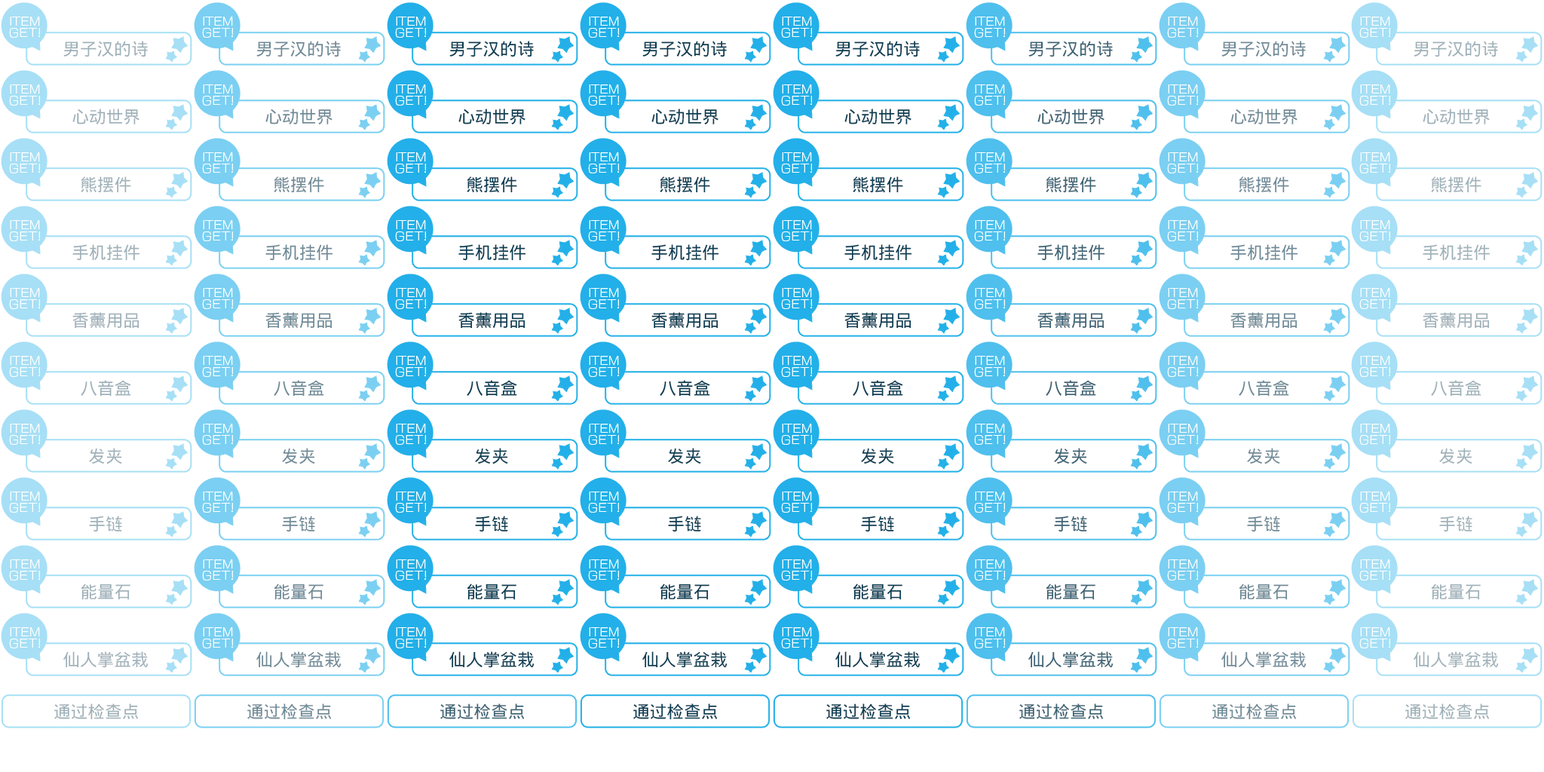
<style>
.page{position:relative;width:1544px;height:772px;background:#ffffff}
.page>*{position:absolute;margin:0}
.t1{font:17.1px "WenQuanYiMicroHeiMono";color:#9cb1ba}
.t2{font:17.1px "WenQuanYiMicroHeiMono";color:#6b8a97}
.t3{font:17.1px "WenQuanYiMicroHeiMono";color:#083c52}
.t4{font:17.1px "WenQuanYiMicroHeiMono";color:#396375}
</style>
<div class="page">
<p class="t1" style="left:63px;top:41px;width:85px;height:16px">男子汉的诗</p>
<p class="t2" style="left:256px;top:41px;width:85px;height:16px">男子汉的诗</p>
<p class="t3" style="left:449px;top:41px;width:85px;height:16px">男子汉的诗</p>
<p class="t3" style="left:642px;top:41px;width:85px;height:16px">男子汉的诗</p>
<p class="t3" style="left:835px;top:41px;width:85px;height:16px">男子汉的诗</p>
<p class="t4" style="left:1029px;top:41px;width:84px;height:16px">男子汉的诗</p>
<p class="t2" style="left:1222px;top:41px;width:84px;height:16px">男子汉的诗</p>
<p class="t1" style="left:1414px;top:41px;width:84px;height:16px">男子汉的诗</p>
<p class="t1" style="left:72px;top:109px;width:67px;height:15px">心动世界</p>
<p class="t2" style="left:265px;top:109px;width:68px;height:15px">心动世界</p>
<p class="t3" style="left:458px;top:109px;width:68px;height:15px">心动世界</p>
<p class="t3" style="left:652px;top:109px;width:67px;height:15px">心动世界</p>
<p class="t3" style="left:845px;top:109px;width:67px;height:15px">心动世界</p>
<p class="t4" style="left:1038px;top:109px;width:67px;height:15px">心动世界</p>
<p class="t2" style="left:1231px;top:109px;width:67px;height:15px">心动世界</p>
<p class="t1" style="left:1423px;top:109px;width:67px;height:15px">心动世界</p>
<p class="t1" style="left:81px;top:176px;width:50px;height:17px">熊摆件</p>
<p class="t2" style="left:274px;top:176px;width:50px;height:17px">熊摆件</p>
<p class="t3" style="left:467px;top:176px;width:50px;height:17px">熊摆件</p>
<p class="t3" style="left:660px;top:176px;width:50px;height:17px">熊摆件</p>
<p class="t3" style="left:853px;top:176px;width:50px;height:17px">熊摆件</p>
<p class="t4" style="left:1046px;top:176px;width:50px;height:17px">熊摆件</p>
<p class="t2" style="left:1239px;top:176px;width:50px;height:17px">熊摆件</p>
<p class="t1" style="left:1431px;top:176px;width:51px;height:17px">熊摆件</p>
<p class="t1" style="left:72px;top:244px;width:68px;height:17px">手机挂件</p>
<p class="t2" style="left:265px;top:244px;width:68px;height:17px">手机挂件</p>
<p class="t3" style="left:458px;top:244px;width:68px;height:17px">手机挂件</p>
<p class="t3" style="left:652px;top:244px;width:67px;height:17px">手机挂件</p>
<p class="t3" style="left:845px;top:244px;width:67px;height:17px">手机挂件</p>
<p class="t4" style="left:1038px;top:244px;width:67px;height:17px">手机挂件</p>
<p class="t2" style="left:1231px;top:244px;width:67px;height:17px">手机挂件</p>
<p class="t1" style="left:1423px;top:244px;width:68px;height:17px">手机挂件</p>
<p class="t1" style="left:72px;top:312px;width:67px;height:17px">香薰用品</p>
<p class="t2" style="left:265px;top:312px;width:68px;height:17px">香薰用品</p>
<p class="t3" style="left:458px;top:312px;width:68px;height:17px">香薰用品</p>
<p class="t3" style="left:652px;top:312px;width:67px;height:17px">香薰用品</p>
<p class="t3" style="left:845px;top:312px;width:67px;height:17px">香薰用品</p>
<p class="t4" style="left:1038px;top:312px;width:67px;height:17px">香薰用品</p>
<p class="t2" style="left:1231px;top:312px;width:67px;height:17px">香薰用品</p>
<p class="t1" style="left:1423px;top:312px;width:67px;height:17px">香薰用品</p>
<p class="t1" style="left:81px;top:380px;width:50px;height:17px">八音盒</p>
<p class="t2" style="left:274px;top:380px;width:50px;height:17px">八音盒</p>
<p class="t3" style="left:467px;top:380px;width:50px;height:17px">八音盒</p>
<p class="t3" style="left:660px;top:380px;width:50px;height:17px">八音盒</p>
<p class="t3" style="left:853px;top:380px;width:50px;height:17px">八音盒</p>
<p class="t4" style="left:1046px;top:380px;width:50px;height:17px">八音盒</p>
<p class="t2" style="left:1239px;top:380px;width:50px;height:17px">八音盒</p>
<p class="t1" style="left:1431px;top:380px;width:51px;height:17px">八音盒</p>
<p class="t1" style="left:89px;top:448px;width:33px;height:16px">发夹</p>
<p class="t2" style="left:282px;top:448px;width:33px;height:16px">发夹</p>
<p class="t3" style="left:475px;top:448px;width:33px;height:16px">发夹</p>
<p class="t3" style="left:668px;top:448px;width:33px;height:16px">发夹</p>
<p class="t3" style="left:861px;top:448px;width:33px;height:16px">发夹</p>
<p class="t4" style="left:1054px;top:448px;width:33px;height:16px">发夹</p>
<p class="t2" style="left:1247px;top:448px;width:33px;height:16px">发夹</p>
<p class="t1" style="left:1439px;top:448px;width:34px;height:16px">发夹</p>
<p class="t1" style="left:89px;top:516px;width:33px;height:16px">手链</p>
<p class="t2" style="left:282px;top:516px;width:33px;height:16px">手链</p>
<p class="t3" style="left:475px;top:516px;width:33px;height:16px">手链</p>
<p class="t3" style="left:668px;top:516px;width:33px;height:16px">手链</p>
<p class="t3" style="left:861px;top:516px;width:33px;height:16px">手链</p>
<p class="t4" style="left:1054px;top:516px;width:33px;height:16px">手链</p>
<p class="t2" style="left:1247px;top:516px;width:33px;height:16px">手链</p>
<p class="t1" style="left:1439px;top:516px;width:34px;height:16px">手链</p>
<p class="t1" style="left:81px;top:584px;width:49px;height:16px">能量石</p>
<p class="t2" style="left:274px;top:584px;width:49px;height:16px">能量石</p>
<p class="t3" style="left:467px;top:584px;width:50px;height:16px">能量石</p>
<p class="t3" style="left:660px;top:584px;width:50px;height:16px">能量石</p>
<p class="t3" style="left:853px;top:584px;width:50px;height:16px">能量石</p>
<p class="t4" style="left:1046px;top:584px;width:50px;height:16px">能量石</p>
<p class="t2" style="left:1239px;top:584px;width:50px;height:16px">能量石</p>
<p class="t1" style="left:1431px;top:584px;width:50px;height:16px">能量石</p>
<p class="t1" style="left:63px;top:652px;width:86px;height:16px">仙人掌盆栽</p>
<p class="t2" style="left:256px;top:652px;width:86px;height:16px">仙人掌盆栽</p>
<p class="t3" style="left:449px;top:652px;width:86px;height:16px">仙人掌盆栽</p>
<p class="t3" style="left:642px;top:652px;width:86px;height:16px">仙人掌盆栽</p>
<p class="t3" style="left:835px;top:652px;width:86px;height:16px">仙人掌盆栽</p>
<p class="t4" style="left:1029px;top:652px;width:85px;height:16px">仙人掌盆栽</p>
<p class="t2" style="left:1222px;top:652px;width:85px;height:16px">仙人掌盆栽</p>
<p class="t1" style="left:1414px;top:652px;width:85px;height:16px">仙人掌盆栽</p>
<p class="t1" style="left:54px;top:704px;width:85px;height:16px">通过检查点</p>
<p class="t2" style="left:247px;top:704px;width:85px;height:16px">通过检查点</p>
<p class="t4" style="left:440px;top:704px;width:85px;height:16px">通过检查点</p>
<p class="t3" style="left:633px;top:704px;width:85px;height:16px">通过检查点</p>
<p class="t3" style="left:826px;top:704px;width:85px;height:16px">通过检查点</p>
<p class="t4" style="left:1019px;top:704px;width:85px;height:16px">通过检查点</p>
<p class="t2" style="left:1213px;top:704px;width:84px;height:16px">通过检查点</p>
<p class="t1" style="left:1406px;top:704px;width:84px;height:16px">通过检查点</p>
</div>
